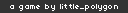
<style>
.page{position:relative;width:128px;height:13px;background:#333333}
.page>*{position:absolute;margin:0}
.t1{font:8px "04b03";letter-spacing:0.025em;color:#ffffff}
</style>
<div class="page">
<p class="t1" style="left:10px;top:4px;width:108px;height:7px">a game by little_polygon</p>
</div>
